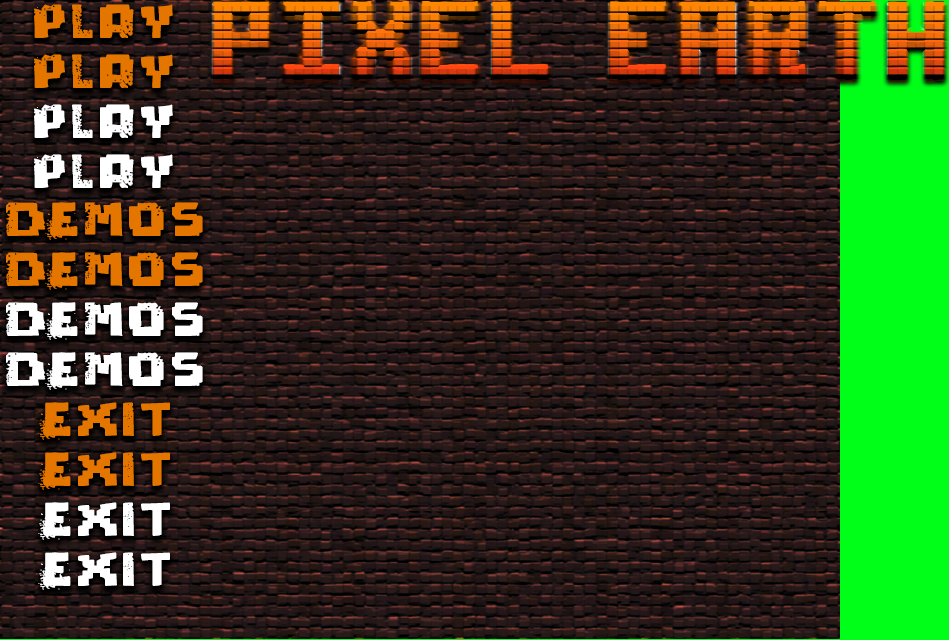
<style>
.page{position:relative;width:949px;height:640px}
.page>*{position:absolute;margin:0}
.t1{font:48px "pixeldead";letter-spacing:0.04em;color:#e47600;scale:1.29 1}
.t2{font:48px "pixeldead";letter-spacing:0.04em;color:#ffffff;scale:1.29 1}
</style>
<div class="page">
<p class="t1" style="left:34px;top:4px;width:139px;height:34px">Play</p>
<p class="t1" style="left:34px;top:54px;width:139px;height:34px">Play</p>
<p class="t2" style="left:34px;top:104px;width:139px;height:34px">Play</p>
<p class="t2" style="left:34px;top:154px;width:139px;height:34px">Play</p>
<p class="t1" style="left:6px;top:202px;width:197px;height:38px">Demos</p>
<p class="t1" style="left:6px;top:252px;width:197px;height:38px">Demos</p>
<p class="t2" style="left:6px;top:302px;width:197px;height:38px">Demos</p>
<p class="t2" style="left:6px;top:352px;width:197px;height:38px">Demos</p>
<p class="t1" style="left:38px;top:402px;width:132px;height:38px">Exit</p>
<p class="t1" style="left:38px;top:452px;width:132px;height:38px">Exit</p>
<p class="t2" style="left:38px;top:502px;width:132px;height:38px">Exit</p>
<p class="t2" style="left:38px;top:552px;width:132px;height:38px">Exit</p>
</div>
